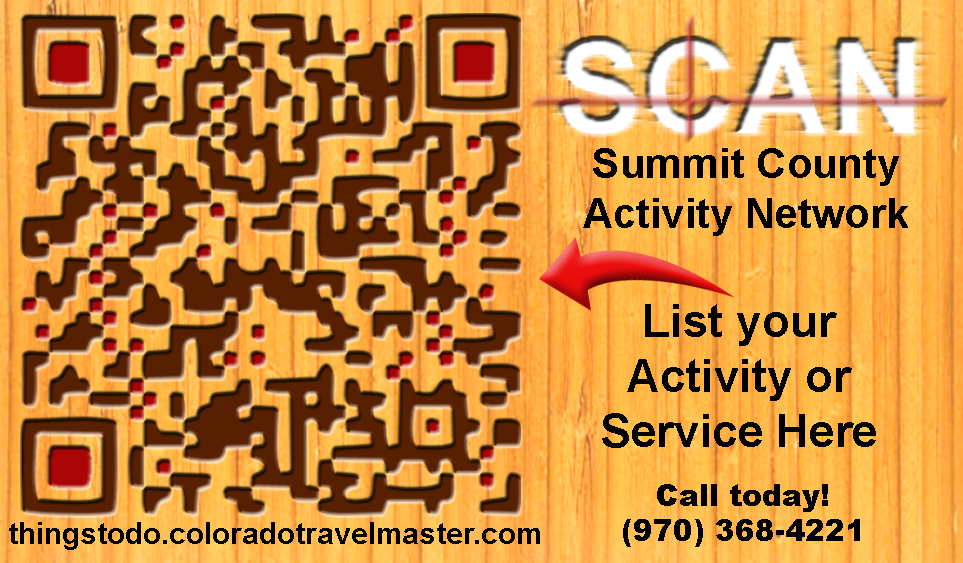
<style>
.page{position:relative;width:963px;height:563px}
.page>*{position:absolute;margin:0}
.t1{font:41.7px "Arial-BoldMT";color:#000000}
.t2{font:45.8px "Arial-BoldMT";color:#000000}
.t3{font:29.2px "Arial-Black";color:#000000}
.t4{font:29.2px "Arial-BoldMT";color:#000000}
</style>
<div class="page">
<p class="t1" style="left:583px;top:148px;width:325px;height:88px;text-align:center">Summit County<br>Activity Network</p>
<p class="t2" style="left:602px;top:304px;width:274px;height:144px;text-align:center">List your<br>Activity or<br>Service Here</p>
<p class="t3" style="left:623px;top:484px;width:237px;height:63px;text-align:center">Call today!<br>(970) 368-4221</p>
<p class="t4" style="left:9px;top:522px;width:531px;height:28px">thingstodo.coloradotravelmaster.com</p>
</div>
